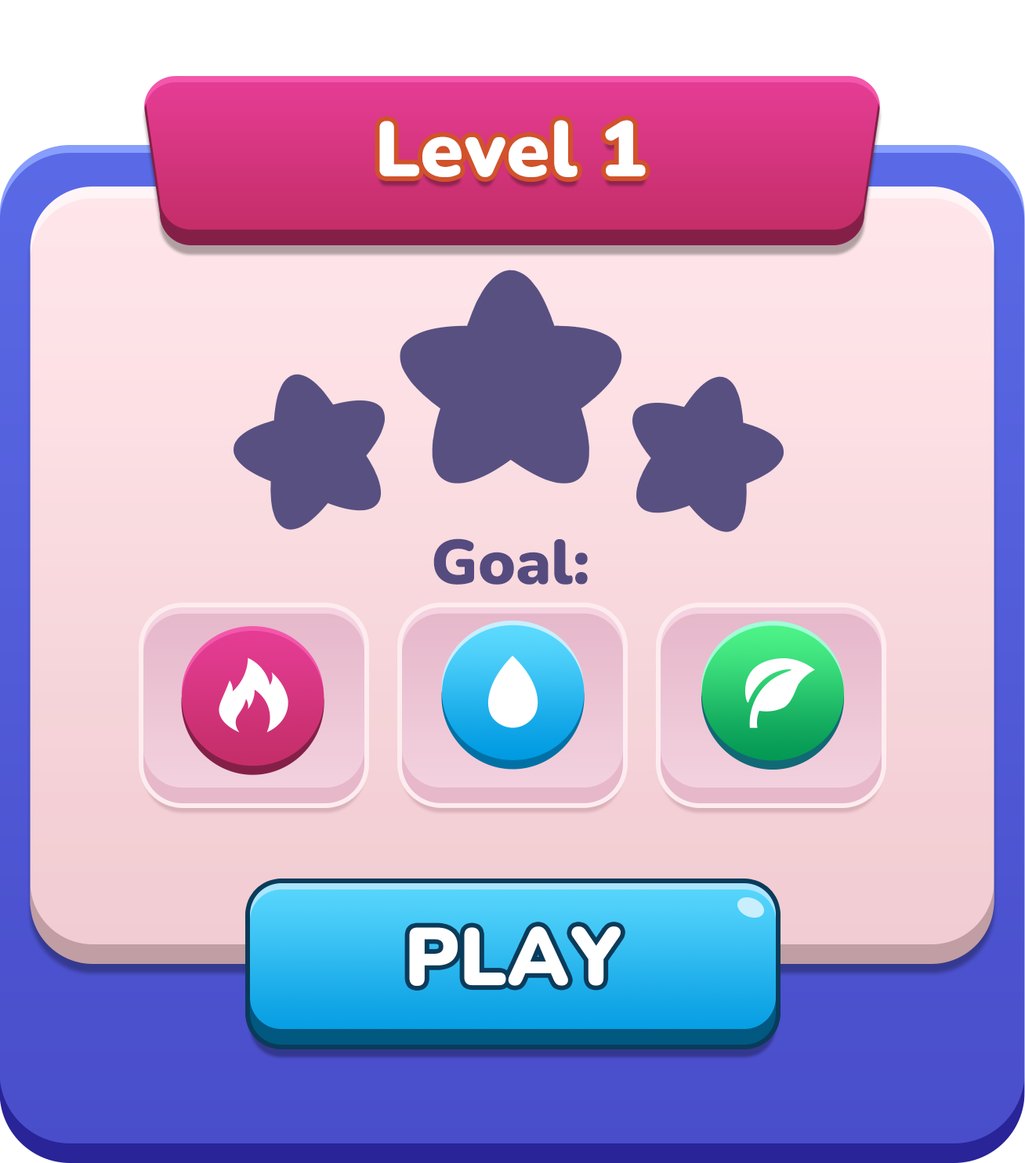
<style>
.page{position:relative;width:1025px;height:1163px}
.page>*{position:absolute;margin:0}
.t1{font:78.4px "Nunito-Black";color:#ffffff}
.t2{font:62.7px "Nunito-Black";color:#554b7f}
.t3{font:81.5px "Nunito-Black";color:#ffffff}
</style>
<div class="page">
<p class="t1" style="left:379px;top:120px;width:267px;height:57px">Level 1</p>
<p class="t2" style="left:433px;top:538px;width:155px;height:47px">Goal:</p>
<p class="t3" style="left:409px;top:926px;width:212px;height:60px">PLAY</p>
</div>
